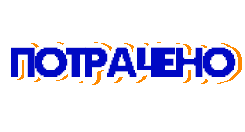
<style>
.page{position:relative;width:245px;height:132px;background:#ffffff}
.page>*{position:absolute;margin:0}
.t1{font:50px "PotrachenoRegular";color:#0009c4}
</style>
<div class="page">
<p class="t1" style="left:11px;top:47px;width:225px;height:30px">ПОТРАЧЕНО</p>
</div>
